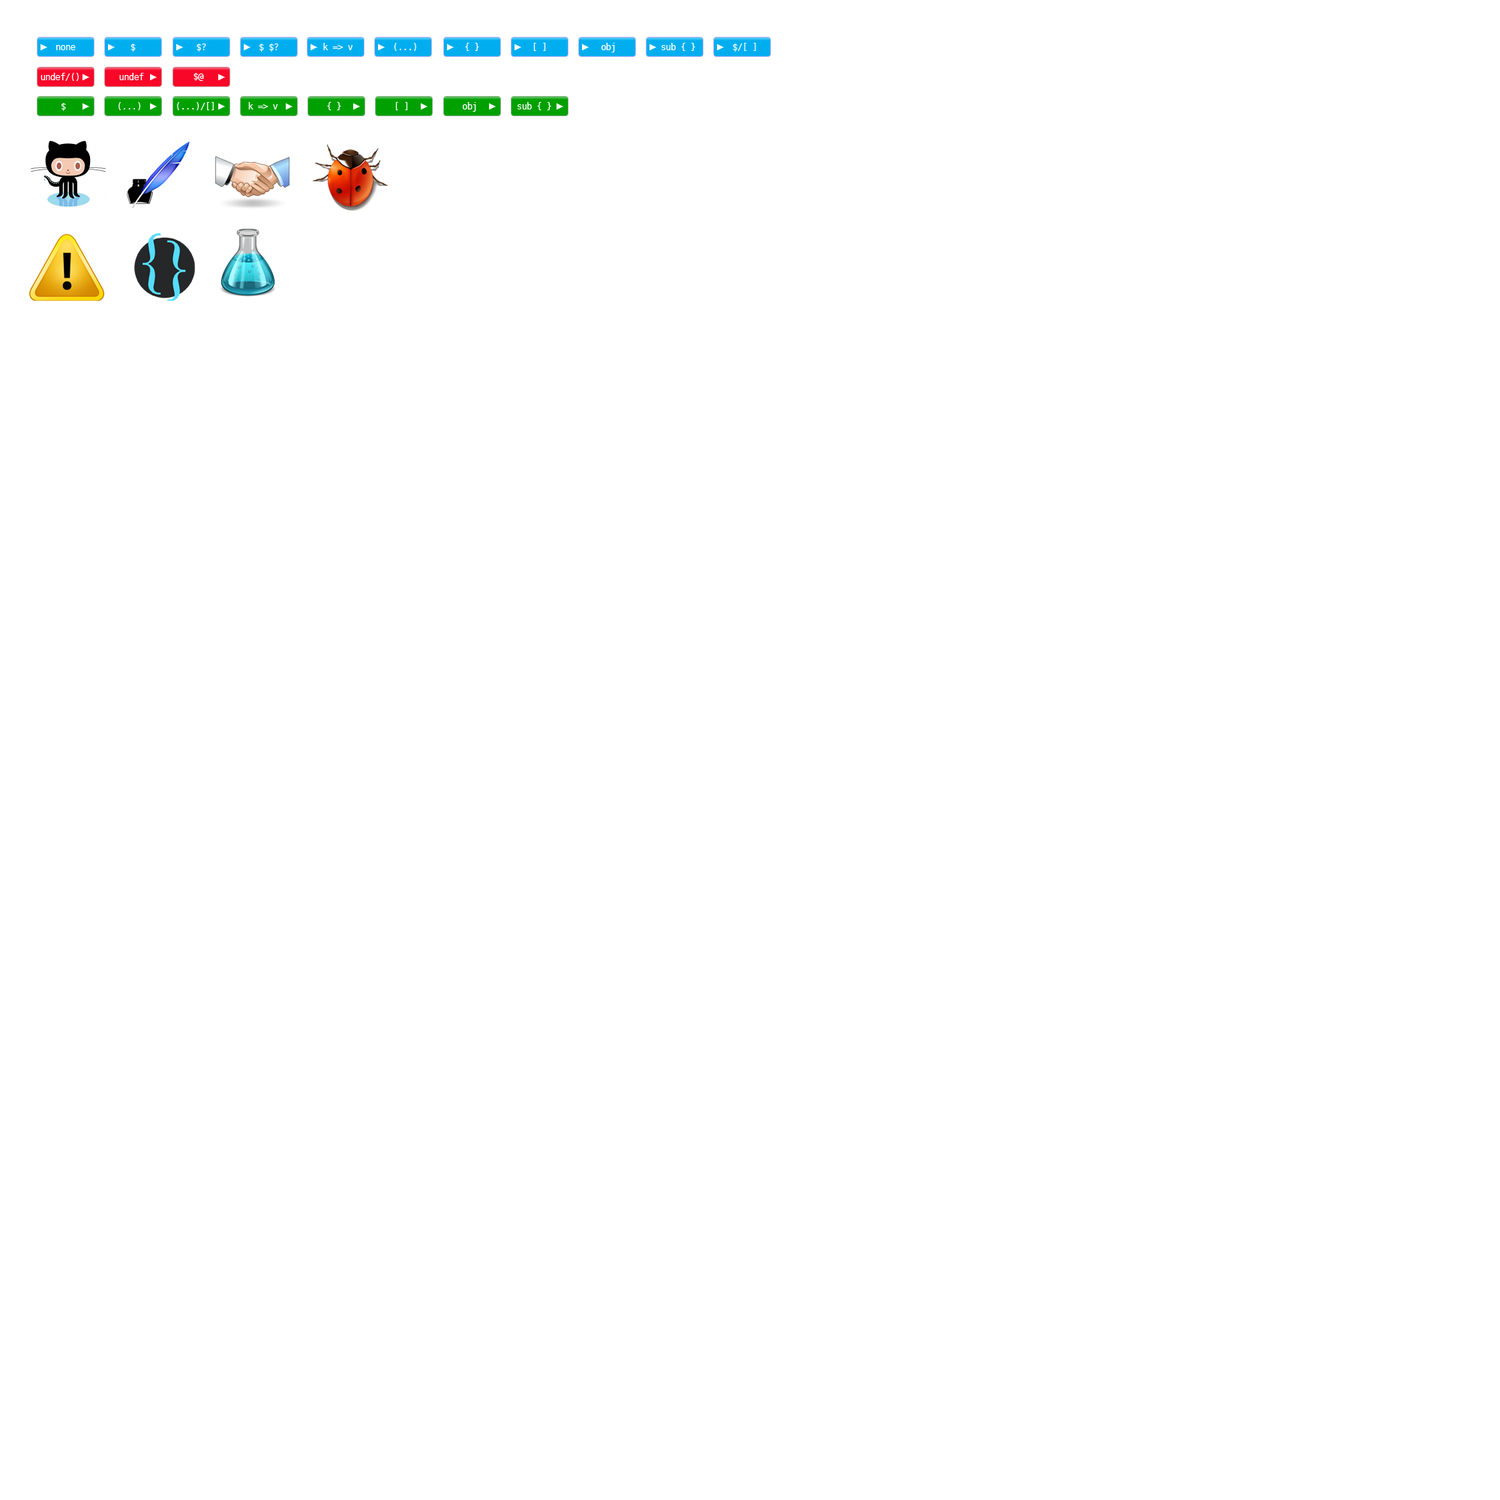
<style>
.page{position:relative;width:1500px;height:1500px;background:#ffffff}
.page>*{position:absolute;margin:0}
.t1{font:9px "ArialMT";color:#ffffff}
.t2{font:9px "DejaVuSansMono";letter-spacing:-0.05em;color:#ffffff}
</style>
<div class="page">
<p class="t1" style="left:40px;top:44px;width:7px;height:6px">►</p>
<p class="t2" style="left:56px;top:45px;width:20px;height:5px">none</p>
<p class="t1" style="left:108px;top:44px;width:7px;height:6px">►</p>
<p class="t2" style="left:130px;top:44px;width:6px;height:8px">$</p>
<p class="t1" style="left:176px;top:44px;width:7px;height:6px">►</p>
<p class="t2" style="left:196px;top:44px;width:10px;height:8px">$?</p>
<p class="t1" style="left:244px;top:44px;width:6px;height:6px">►</p>
<p class="t2" style="left:260px;top:44px;width:18px;height:8px">$ $?</p>
<p class="t1" style="left:310px;top:44px;width:7px;height:6px">►</p>
<p class="t2" style="left:323px;top:43px;width:30px;height:7px">k =&gt; v</p>
<p class="t1" style="left:378px;top:44px;width:7px;height:6px">►</p>
<p class="t2" style="left:394px;top:43px;width:22px;height:8px">(...)</p>
<p class="t1" style="left:447px;top:44px;width:7px;height:6px">►</p>
<p class="t2" style="left:465px;top:43px;width:14px;height:8px">{ }</p>
<p class="t1" style="left:514px;top:44px;width:7px;height:6px">►</p>
<p class="t2" style="left:533px;top:43px;width:13px;height:8px">[ ]</p>
<p class="t1" style="left:582px;top:44px;width:7px;height:6px">►</p>
<p class="t2" style="left:601px;top:43px;width:14px;height:9px">obj</p>
<p class="t1" style="left:650px;top:44px;width:6px;height:6px">►</p>
<p class="t2" style="left:662px;top:43px;width:33px;height:8px">sub { }</p>
<p class="t1" style="left:717px;top:44px;width:7px;height:6px">►</p>
<p class="t2" style="left:733px;top:43px;width:23px;height:9px">$/[ ]</p>
<p class="t2" style="left:40px;top:73px;width:39px;height:8px">undef/()</p>
<p class="t1" style="left:82px;top:74px;width:7px;height:6px">►</p>
<p class="t2" style="left:119px;top:73px;width:25px;height:7px">undef</p>
<p class="t1" style="left:150px;top:74px;width:7px;height:6px">►</p>
<p class="t2" style="left:194px;top:73px;width:10px;height:8px">$@</p>
<p class="t1" style="left:218px;top:74px;width:7px;height:6px">►</p>
<p class="t2" style="left:118px;top:102px;width:23px;height:8px">(...)</p>
<p class="t2" style="left:177px;top:102px;width:37px;height:8px">(...)/[]</p>
<p class="t2" style="left:248px;top:102px;width:30px;height:8px">k =&gt; v</p>
<p class="t2" style="left:327px;top:102px;width:14px;height:8px">{ }</p>
<p class="t2" style="left:395px;top:102px;width:13px;height:8px">[ ]</p>
<p class="t2" style="left:462px;top:102px;width:14px;height:10px">obj</p>
<p class="t2" style="left:518px;top:102px;width:33px;height:8px">sub { }</p>
<p class="t2" style="left:62px;top:103px;width:4px;height:8px">$</p>
<p class="t1" style="left:82px;top:103px;width:7px;height:7px">►</p>
<p class="t1" style="left:150px;top:103px;width:7px;height:7px">►</p>
<p class="t1" style="left:218px;top:103px;width:7px;height:7px">►</p>
<p class="t1" style="left:286px;top:103px;width:6px;height:7px">►</p>
<p class="t1" style="left:353px;top:103px;width:7px;height:7px">►</p>
<p class="t1" style="left:421px;top:103px;width:7px;height:7px">►</p>
<p class="t1" style="left:489px;top:103px;width:7px;height:7px">►</p>
<p class="t1" style="left:556px;top:103px;width:7px;height:7px">►</p>
</div>
